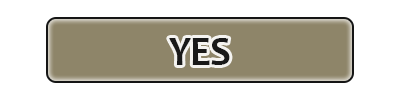
<style>
.page{position:relative;width:400px;height:100px;background:#ffffff}
.page>*{position:absolute;margin:0}
.t1{font:42.4px "Candara-Bold";letter-spacing:-0.02em;color:#191919;scale:0.94 1}
</style>
<div class="page">
<p class="t1" style="left:169px;top:38px;width:61px;height:27px">YES</p>
</div>
